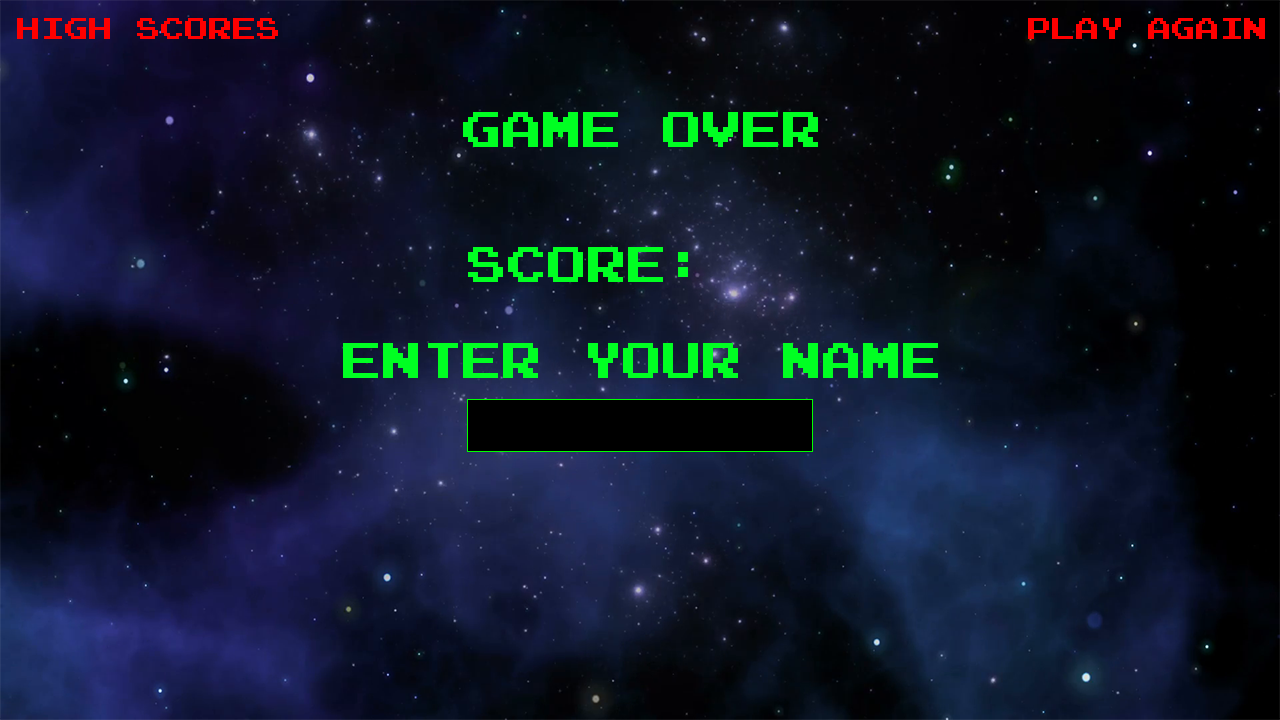
<style>
.page{position:relative;width:1280px;height:720px}
.page>*{position:absolute;margin:0}
.t1{font:24px "Emulogic";color:#ff0000}
.t2{font:40px "Emulogic";color:#00ff22}
</style>
<div class="page">
<p class="t1" style="left:17px;top:18px;width:261px;height:21px">HIgh scores</p>
<p class="t1" style="left:1028px;top:18px;width:237px;height:21px">Play Again</p>
<p class="t2" style="left:463px;top:112px;width:355px;height:35px">Game Over</p>
<p class="t2" style="left:468px;top:247px;width:220px;height:35px">Score:</p>
<p class="t2" style="left:343px;top:343px;width:595px;height:35px">Enter your name</p>
</div>
